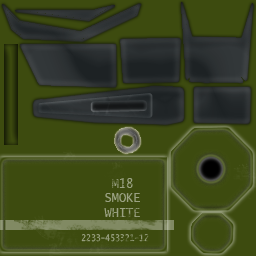
<style>
.page{position:relative;width:256px;height:256px;background:#3d4b0f}
.page>*{position:absolute;margin:0}
.t1{font:14.4px "LucidaConsole";color:#9aa182;scale:0.83 1}
.t2{font:9.6px "LucidaConsole";color:#9aa182;scale:0.83 1}
</style>
<div class="page">
<p class="t1" style="left:104px;top:178px;width:36px;height:39px;text-align:center">M18<br>SMOKE<br>WHITE</p>
<p class="t2" style="left:81px;top:234px;width:68px;height:8px">2233-453321-12</p>
</div>
